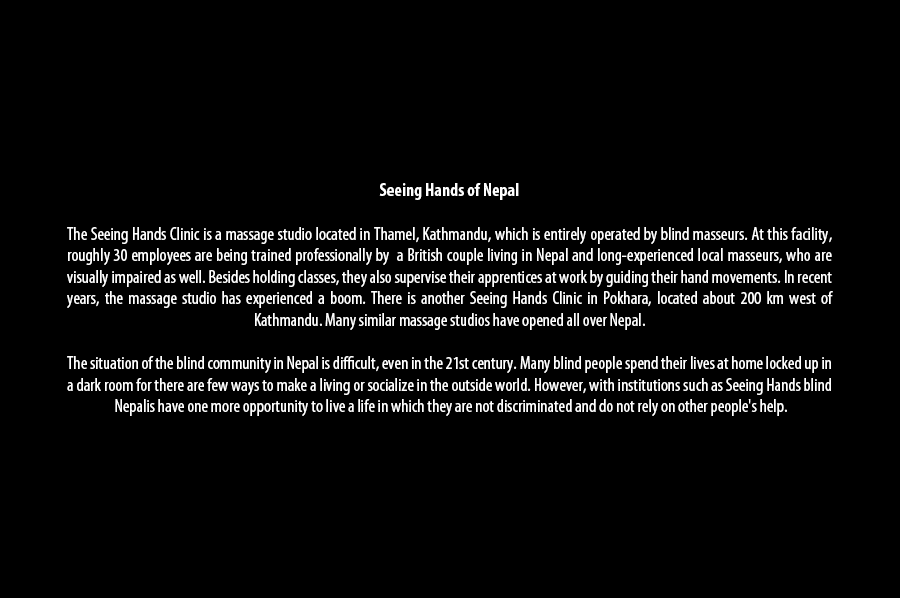
<style>
.page{position:relative;width:900px;height:598px;background:#000000}
.page>*{position:absolute;margin:0}
.t1{font:18px "MyriadPro-Cond";color:#ffffff}
.t2{font:18px "MyriadPro-BoldCond";color:#ffffff}
</style>
<div class="page">
<p class="t1" style="left:67px;top:183px;width:766px;height:233px;text-align:center"><span class="t2">Seeing Hands of Nepal<br><br></span>The Seeing Hands Clinic is a massage studio located in Thamel, Kathmandu, which is entirely operated by blind masseurs. At this facility, roughly 30 employees are being trained professionally by  a British couple living in Nepal and long-experienced local masseurs, who are visually impaired as well. Besides holding classes, they also supervise their apprentices at work by guiding their hand movements. In recent years, the massage studio has experienced a boom. There is another Seeing Hands Clinic in Pokhara, located about 200 km west of  <br>Kathmandu. Many similar massage studios have opened all over Nepal.<br><br>The situation of the blind community in Nepal is difficult, even in the 21st century. Many blind people spend their lives at home locked up in a dark room for there are few ways to make a living or socialize in the outside world. However, with institutions such as Seeing Hands blind<br> Nepalis have one more opportunity to live a life in which they are not discriminated and do not rely on other people's help.</p>
</div>
